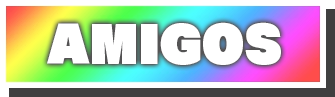
<style>
.page{position:relative;width:335px;height:97px;background:#ffffff}
.page>*{position:absolute;margin:0}
.t1{font:48px "RaglanPunchStd-UB";color:#ffffff}
</style>
<div class="page">
<p class="t1" style="left:47px;top:22px;width:234px;height:43px">AMIGOS</p>
</div>
